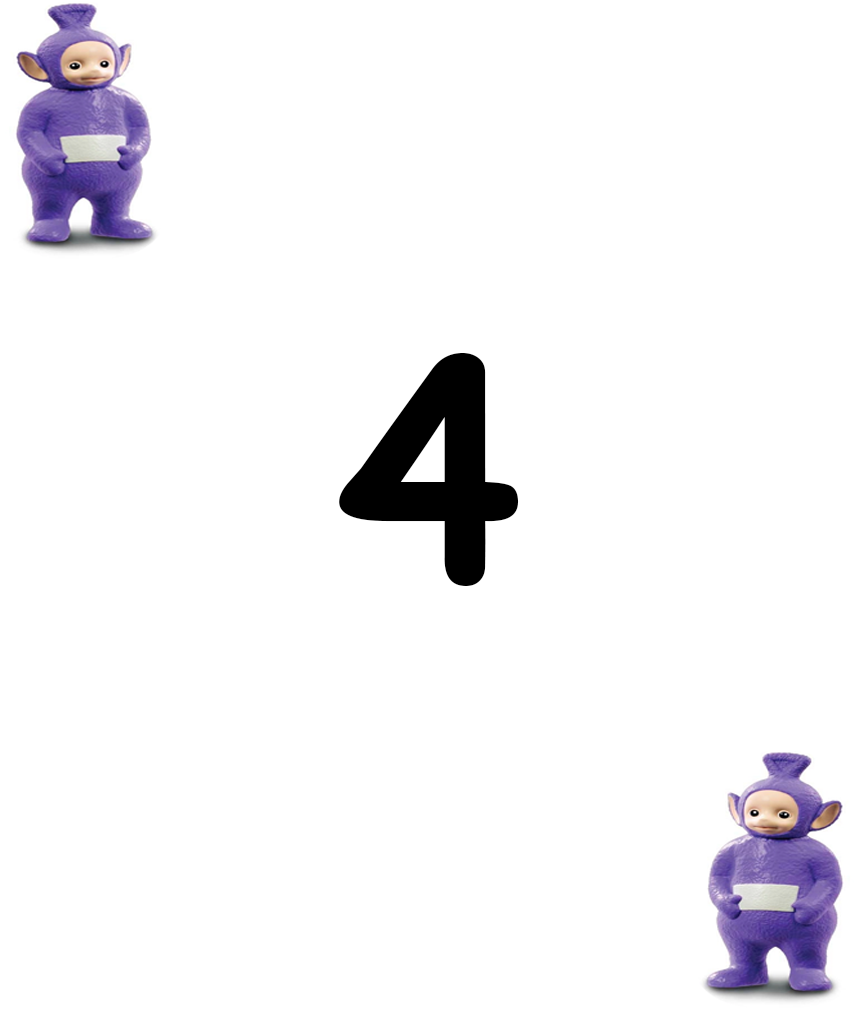
<style>
.page{position:relative;width:859px;height:1009px;background:#ffffff}
.page>*{position:absolute;margin:0}
.t1{font:300px "ComicSansMS-Bold";color:#000000;font-variant:small-caps}
</style>
<div class="page">
<p class="t1" style="left:339px;top:353px;width:180px;height:233px">4</p>
</div>
